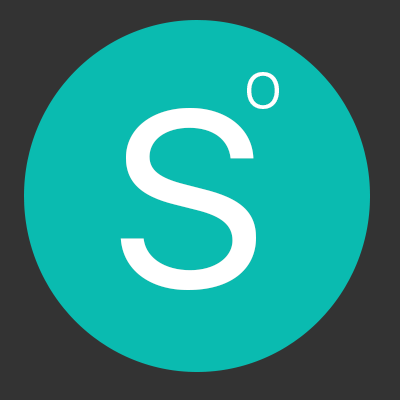
<style>
.page{position:relative;width:400px;height:400px;background:#0abbb0}
.page>*{position:absolute;margin:0}
.t1{font:65.7px "SFUIDisplay-Light";color:#ffffff}
.t2{font:250.1px "SFUIDisplay-Regular";color:#ffffff;scale:1.03 1}
</style>
<div class="page">
<p class="t1" style="left:247px;top:72px;width:32px;height:37px">o</p>
<p class="t2" style="left:120px;top:108px;width:136px;height:182px">S</p>
</div>
